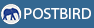
<style>
.page{position:relative;width:94px;height:28px;background:#336791}
.page>*{position:absolute;margin:0}
.t1{font:16.2px "MyriadPro-Regular";color:#ffffff}
</style>
<div class="page">
<p class="t1" style="left:24px;top:8px;width:67px;height:11px">POSTBIRD</p>
</div>
